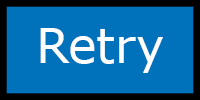
<style>
.page{position:relative;width:200px;height:100px;background:#0072bc}
.page>*{position:absolute;margin:0}
.t1{font:48px "MSReferenceSansSerif";color:#ffffff}
</style>
<div class="page">
<p class="t1" style="left:40px;top:28px;width:123px;height:45px">Retry</p>
</div>
